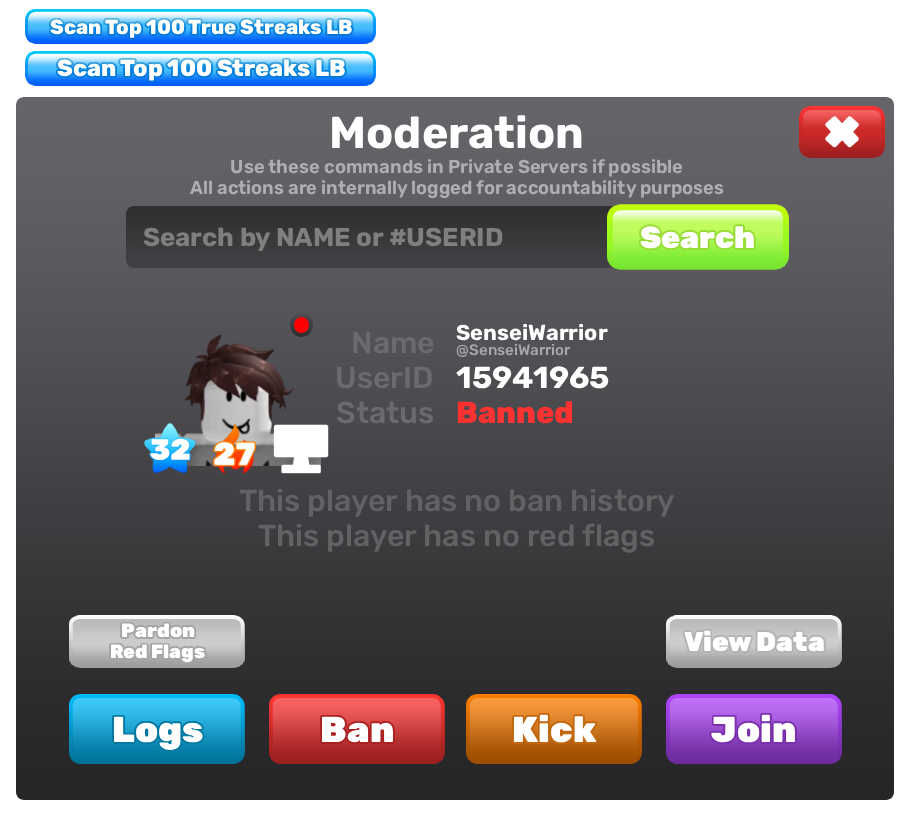
<style>
.page{position:relative;width:907px;height:814px}
.page>*{position:absolute;margin:0}
.t1{font:20.3px "Rubik-ExtraBold";color:#ffffff}
.t2{font:23.3px "Rubik-ExtraBold";color:#ffffff}
.t3{font:44.5px "Rubik-Bold";color:#ffffff}
.t4{font:18.7px "Rubik-SemiBold";color:#afaeb1}
.t5{font:25.8px "Rubik-Bold";color:#7f7f7f}
.t6{font:30.7px "Rubik-Black";color:#ffffff}
.t7{font:21.6px "Rubik-Bold";color:#ffffff}
.t8{font:30.4px "Rubik-Medium";color:#6b6a6d}
.t9{font:15.2px "Rubik-Medium";color:#a8a7a9}
.t10{font:30.5px "Rubik-Bold";color:#ffffff;scale:1.03 1}
.t11{font:30.5px "Rubik-ExtraBold";color:#ff3232}
.t12{font:30.5px "Rubik-Medium";color:#626164}
.t13{font:30.4px "Rubik-Medium";color:#626164}
.t14{font:19.1px "Rubik-Black";color:#ffffff}
.t15{font:27.1px "Rubik-Black";color:#ffffff}
.t16{font:36.2px "Rubik-Black";color:#ffffff}
</style>
<div class="page">
<p class="t1" style="left:50px;top:19px;width:302px;height:19px">Scan Top 100 True Streaks LB</p>
<p class="t2" style="left:57px;top:59px;width:288px;height:22px">Scan Top 100 Streaks LB</p>
<p class="t3" style="left:332px;top:115px;width:250px;height:34px">Moderation</p>
<p class="t4" style="left:231px;top:159px;width:452px;height:18px">Use these commands in Private Servers if possible</p>
<p class="t4" style="left:190px;top:180px;width:534px;height:18px">All actions are internally logged for accountability purposes</p>
<p class="t5" style="left:143px;top:227px;width:360px;height:24px">Search by NAME or #USERID</p>
<p class="t6" style="left:640px;top:226px;width:114px;height:23px">Search</p>
<p class="t7" style="left:456px;top:324px;width:152px;height:17px">SenseiWarrior</p>
<p class="t8" style="left:353px;top:331px;width:81px;height:23px">Name</p>
<p class="t9" style="left:456px;top:344px;width:115px;height:13px">@SenseiWarrior</p>
<p class="t8" style="left:337px;top:366px;width:95px;height:23px">UserID</p>
<p class="t10" style="left:456px;top:366px;width:153px;height:23px">15941965</p>
<p class="t8" style="left:337px;top:401px;width:97px;height:23px">Status</p>
<p class="t11" style="left:457px;top:401px;width:115px;height:23px">Banned</p>
<p class="t12" style="left:239px;top:489px;width:435px;height:28px">This player has no ban history</p>
<p class="t13" style="left:258px;top:523px;width:397px;height:30px">This player has no red flags</p>
<p class="t14" style="left:122px;top:623px;width:73px;height:15px">Pardon</p>
<p class="t15" style="left:684px;top:630px;width:140px;height:22px">View Data</p>
<p class="t14" style="left:111px;top:644px;width:94px;height:19px">Red Flags</p>
<p class="t16" style="left:113px;top:716px;width:90px;height:34px">Logs</p>
<p class="t16" style="left:321px;top:716px;width:72px;height:27px">Ban</p>
<p class="t16" style="left:513px;top:714px;width:84px;height:29px">Kick</p>
<p class="t16" style="left:711px;top:714px;width:84px;height:29px">Join</p>
</div>
